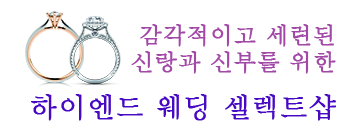
<style>
.page{position:relative;width:350px;height:130px;background:#ffffff}
.page>*{position:absolute;margin:0}
.t1{font:23px "Batang";color:#a249a7;font-weight:bold}
.t2{font:28px "Batang";color:#4709c4;font-weight:bold}
</style>
<div class="page">
<p class="t1" style="left:131px;top:24px;width:205px;height:50px;text-align:right">감각적이고 세련된<br>신랑과 신부를 위한</p>
<p class="t2" style="left:31px;top:94px;width:305px;height:27px">하이엔드 웨딩 셀렉트샵</p>
</div>
